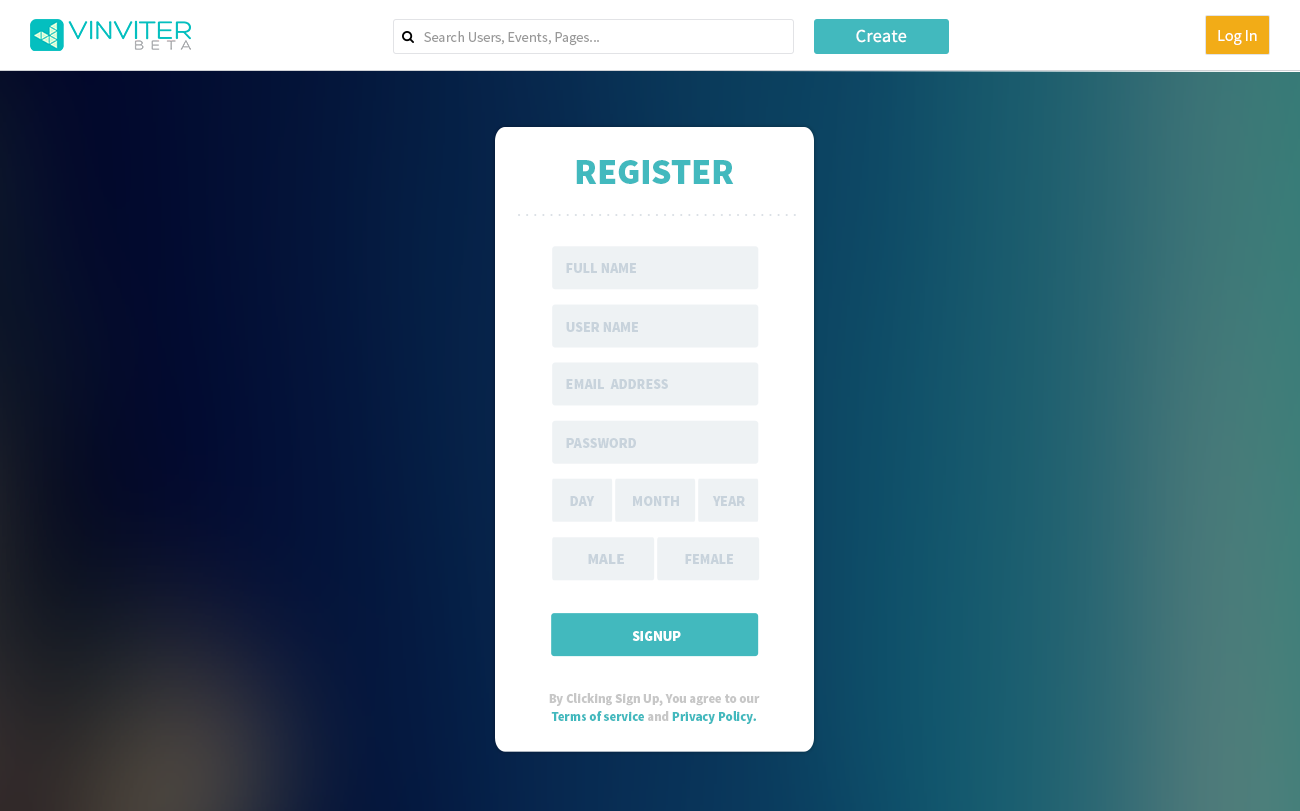
<style>
.page{position:relative;width:1300px;height:811px;background:#ffffff}
.page>*{position:absolute;margin:0}
.t1{font:18px "SourceSansPro-Regular";letter-spacing:0.02em;color:#ffffff}
.t2{font:16px "SourceSansPro-Regular";color:#ffffff}
.t3{font:14.3px "SourceSansPro-Regular";color:#999999}
.t4{font:36px "SourceSansPro-Black";color:#42b9be;text-transform:uppercase}
.t5{font:14px "SourceSansPro-Black";color:#c8d3dc;text-transform:uppercase}
.t6{font:15.3px "SourceSansPro-Black";color:#c8d3dc;text-transform:uppercase}
.t7{font:14px "SourceSansPro-Black";color:#ffffff;text-transform:uppercase}
.t8{font:12.8px/5.2px "SourceSansPro-Black";color:#c7c7c7}
.t9{font:12.8px/5.2px "SourceSansPro-Black";color:#42b9be}
</style>
<div class="page">
<p class="t1" style="left:856px;top:29px;width:51px;height:14px">Create</p>
<p class="t2" style="left:1218px;top:30px;width:39px;height:15px">Log In</p>
<p class="t3" style="left:424px;top:31px;width:175px;height:15px">Search Users, Events, Pages...</p>
<p class="t4" style="left:576px;top:160px;width:158px;height:24px">register</p>
<p class="t5" style="left:566px;top:263px;width:70px;height:10px">Full Name</p>
<p class="t5" style="left:566px;top:322px;width:72px;height:10px">User Name</p>
<p class="t5" style="left:566px;top:379px;width:102px;height:10px">Email  Address</p>
<p class="t5" style="left:566px;top:438px;width:70px;height:10px">PASSWORD</p>
<p class="t5" style="left:570px;top:496px;width:25px;height:10px">Day</p>
<p class="t5" style="left:633px;top:496px;width:46px;height:10px">Month</p>
<p class="t5" style="left:712px;top:496px;width:33px;height:10px">Year</p>
<p class="t6" style="left:588px;top:554px;width:36px;height:10px">male</p>
<p class="t5" style="left:685px;top:554px;width:48px;height:10px">female</p>
<p class="t7" style="left:632px;top:631px;width:49px;height:10px">Signup</p>
<p class="t8" style="left:549px;top:693px;width:211px;height:31px;text-align:center">By Clicking Sign Up, You agree to our <br><span class="t9">Terms of service </span>and <span class="t9">Privacy Policy.</span></p>
</div>
